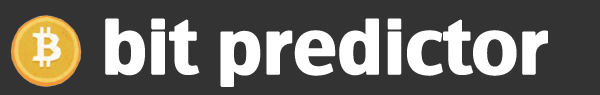
<style>
.page{position:relative;width:600px;height:95px;background:#333333}
.page>*{position:absolute;margin:0}
.t1{font:72px "CharcoalCY";letter-spacing:-0.025em;color:#ffffff;font-weight:bold}
</style>
<div class="page">
<p class="t1" style="left:105px;top:18px;width:443px;height:69px">bit predictor</p>
</div>
